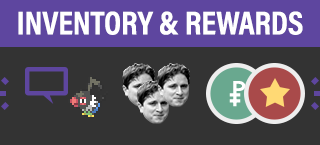
<style>
.page{position:relative;width:320px;height:145px;background:#333333}
.page>*{position:absolute;margin:0}
.t1{font:33.3px "AcuminProCond-Bold";color:#ffffff;text-transform:uppercase}
</style>
<div class="page">
<p class="t1" style="left:18px;top:11px;width:285px;height:24px">Inventory &amp; Rewards</p>
</div>
